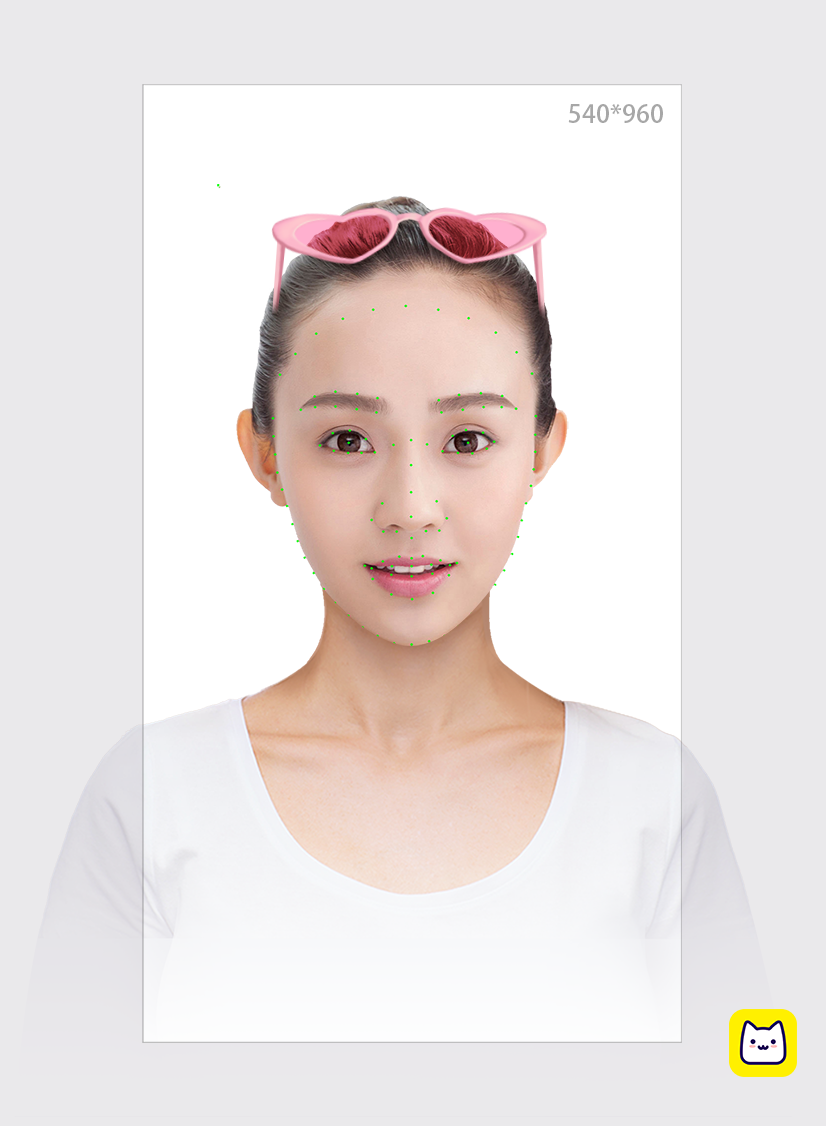
<style>
.page{position:relative;width:826px;height:1126px;background:#eae9eb}
.page>*{position:absolute;margin:0}
.t1{font:25px "AdobeHeitiStd-Regular";color:#a7a7a7}
</style>
<div class="page">
<p class="t1" style="left:568px;top:104px;width:95px;height:19px">540*960</p>
</div>
